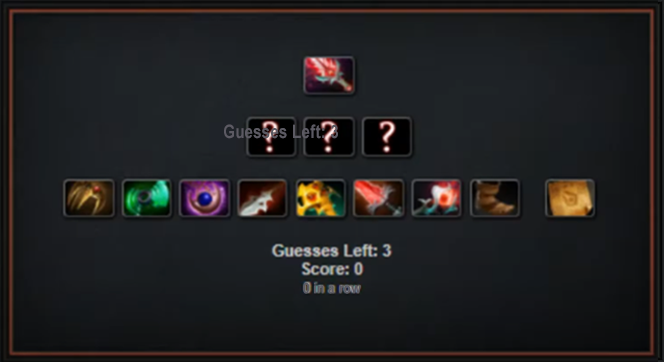
<style>
.page{position:relative;width:664px;height:362px}
.page>*{position:absolute;margin:0}
.t1{font:18.5px "Arial-BoldMT";letter-spacing:0.02em;color:#5c5a63;scale:0.81 1}
.t2{font:14.6px "Arial-BoldMT";letter-spacing:0.02em;color:#5c5a63;scale:0.83 1}
</style>
<div class="page">
<p class="t1" style="left:224px;top:124px;width:114px;height:15px">Guesses Left: 3</p>
<p class="t2" style="left:303px;top:282px;width:58px;height:12px">0 in a row</p>
</div>
